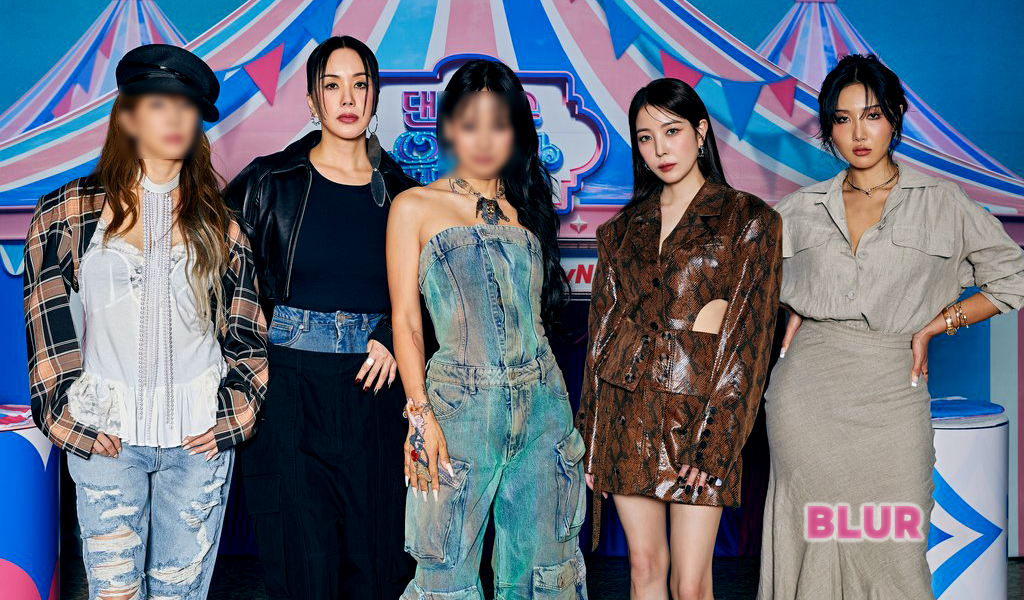
<style>
.page{position:relative;width:1024px;height:600px}
.page>*{position:absolute;margin:0}
.t1{font:36px "TTSupersizeBk";color:#d46293}
</style>
<div class="page">
<p class="t1" style="left:807px;top:506px;width:115px;height:33px">BLUR</p>
</div>
